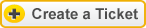
<style>
.page{position:relative;width:146px;height:28px}
.page>*{position:absolute;margin:0}
.t1{font:15px "Arial-BoldMT";color:#4d4d4d}
</style>
<div class="page">
<p class="t1" style="left:32px;top:8px;width:106px;height:12px">Create a Ticket</p>
</div>
